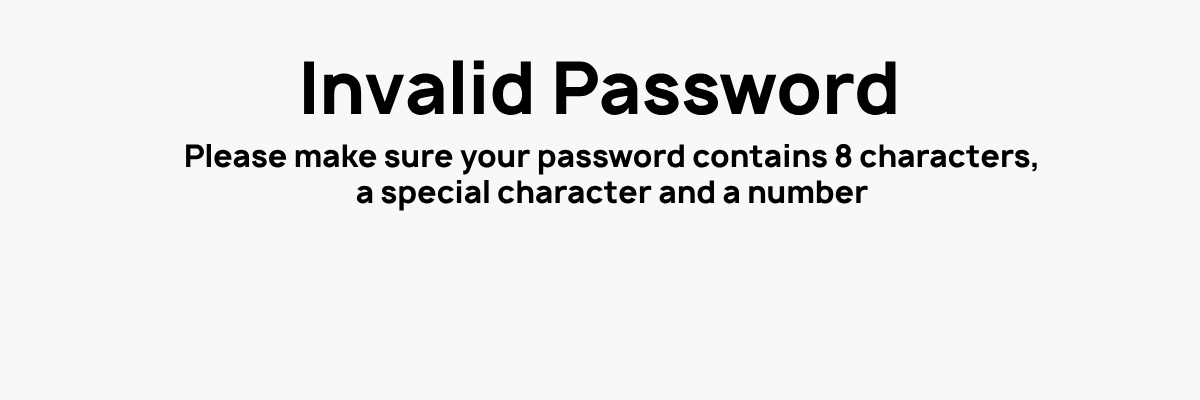
<style>
.page{position:relative;width:1200px;height:400px;background:#f8f8f8}
.page>*{position:absolute;margin:0}
.t1{font:70px "Manrope-Bold";color:#000000}
.t2{font:30px "Manrope-Bold";color:#000000}
</style>
<div class="page">
<p class="t1" style="left:304px;top:60px;width:592px;height:56px">Invalid Password</p>
<p class="t2" style="left:186px;top:144px;width:851px;height:67px;text-align:center">Please make sure your password contains 8 characters,<br>a special character and a number</p>
</div>
